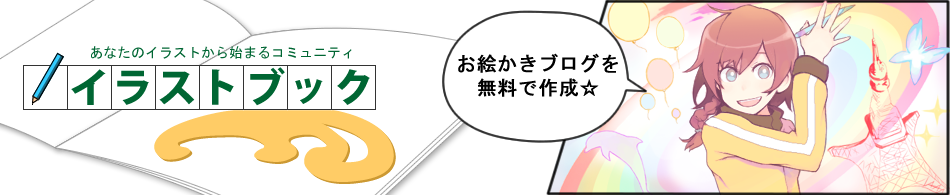
<style>
.page{position:relative;width:950px;height:195px;background:#ffffff}
.page>*{position:absolute;margin:0}
.t1{font:14px "MS-Gothic";color:#006633}
.t2{font:20px/24px "MS-Gothic";color:#000000;font-weight:bold}
</style>
<div class="page">
<p class="t1" style="left:91px;top:46px;width:261px;height:13px">あなたのイラストから始まるコミュニティ</p>
<p class="t2" style="left:458px;top:53px;width:160px;height:44px;text-align:center">お絵かきブログを<br>無料で作成☆</p>
</div>
